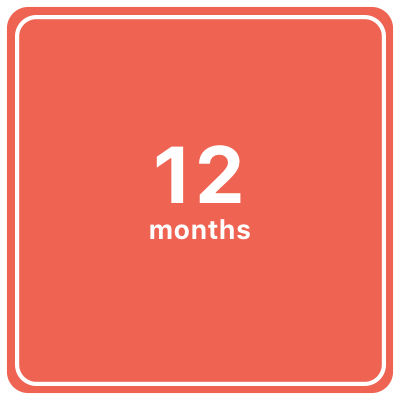
<style>
.page{position:relative;width:400px;height:400px;background:#ee6352}
.page>*{position:absolute;margin:0}
.t1{font:80px "SFUIText-Bold";letter-spacing:0.01em;color:#ffffff}
.t2{font:26.7px "SFUIText-Bold";letter-spacing:0.01em;color:#ffffff}
</style>
<div class="page">
<p class="t1" style="left:156px;top:145px;width:85px;height:58px">12</p>
<p class="t2" style="left:150px;top:219px;width:100px;height:21px">months</p>
</div>
